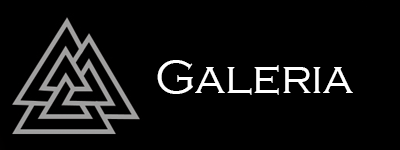
<style>
.page{position:relative;width:400px;height:150px;background:#000000}
.page>*{position:absolute;margin:0}
.t1{font:48px "CopperplateGothic-Light";color:#ffffff}
</style>
<div class="page">
<p class="t1" style="left:157px;top:60px;width:196px;height:35px">Galeria</p>
</div>
